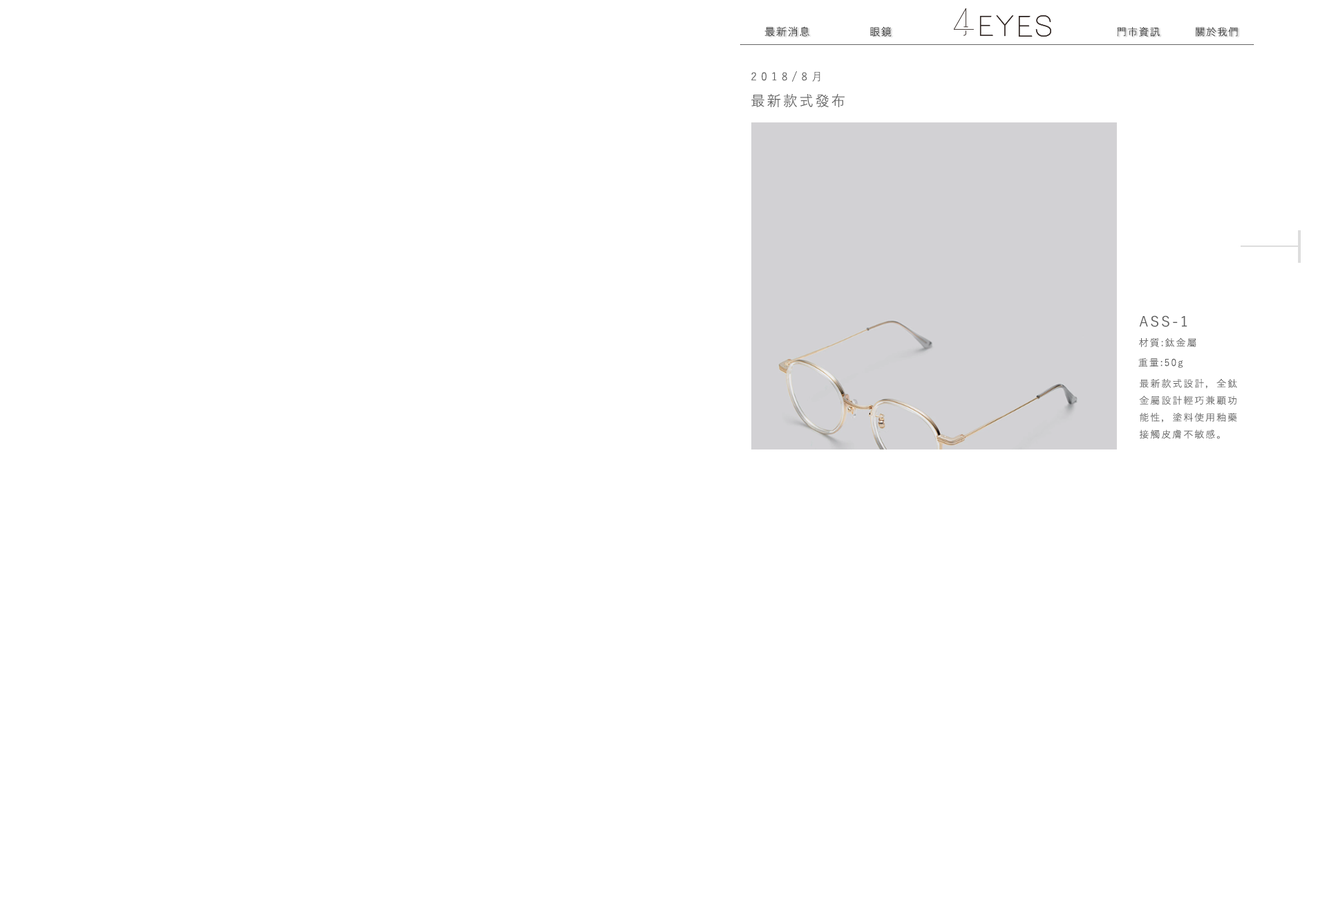
<style>
.page{position:relative;width:1327px;height:899px;background:#ffffff}
.page>*{position:absolute;margin:0}
.t1{font:10.7px "YuGothic-Regular";letter-spacing:0.08em;color:#353535}
.t2{font:10.7px "YuGothic-Regular";letter-spacing:0.08em;color:#343434}
.t3{font:10.3px "YuGothic-Regular";letter-spacing:0.08em;color:#353535}
.t4{font:10.3px "YuGothic-Regular";letter-spacing:0.08em;color:#333333}
.t5{font:11.1px "YuGothic-Regular";letter-spacing:0.4em;color:#616161}
.t6{font:11.1px "YuGothic-Regular";letter-spacing:0.14em;color:#616161}
.t7{font:14.5px "YuGothic-Regular";letter-spacing:0.14em;color:#616161}
.t8{font:14.2px "YuGothic-Regular";letter-spacing:0.14em;color:#616161}
.t9{font:9.7px "YuGothic-Regular";letter-spacing:0.14em;color:#616161}
</style>
<div class="page">
<p class="t1" style="left:764px;top:26px;width:45px;height:11px">最新消息</p>
<p class="t2" style="left:870px;top:26px;width:22px;height:11px">眼鏡</p>
<p class="t3" style="left:1117px;top:27px;width:43px;height:10px">門市資訊</p>
<p class="t4" style="left:1196px;top:27px;width:42px;height:10px">關於我們</p>
<p class="t5" style="left:751px;top:71px;width:94px;height:36px">2018/8<span class="t6">月</span><span class="t7">  <br>最新款式發布</span></p>
<p class="t8" style="left:1139px;top:315px;width:48px;height:12px">ASS-1</p>
<p class="t9" style="left:1139px;top:337px;width:57px;height:10px">材質:鈦金屬</p>
<p class="t9" style="left:1138px;top:357px;width:45px;height:11px">重量:50g</p>
<p class="t9" style="left:1139px;top:378px;width:98px;height:61px">最新款式設計，全鈦<br>金屬設計輕巧兼顧功<br>能性，塗料使用釉藥<br>接觸皮膚不敏感。</p>
</div>
